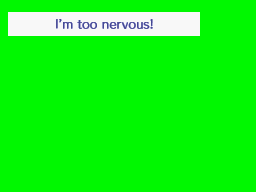
<style>
.page{position:relative;width:256px;height:192px;background:#00f800}
.page>*{position:absolute;margin:0}
.t1{font:11px "HummingStd-M";letter-spacing:0.025em;color:#444894}
</style>
<div class="page">
<p class="t1" style="left:56px;top:19px;width:97px;height:10px">I’m too nervous!</p>
</div>
